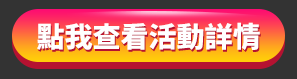
<style>
.page{position:relative;width:297px;height:79px;background:#333333}
.page>*{position:absolute;margin:0}
.t1{font:28px "NotoSansTC-Black";color:#ffffff}
</style>
<div class="page">
<p class="t1" style="left:37px;top:22px;width:223px;height:28px">點我查看活動詳情</p>
</div>
